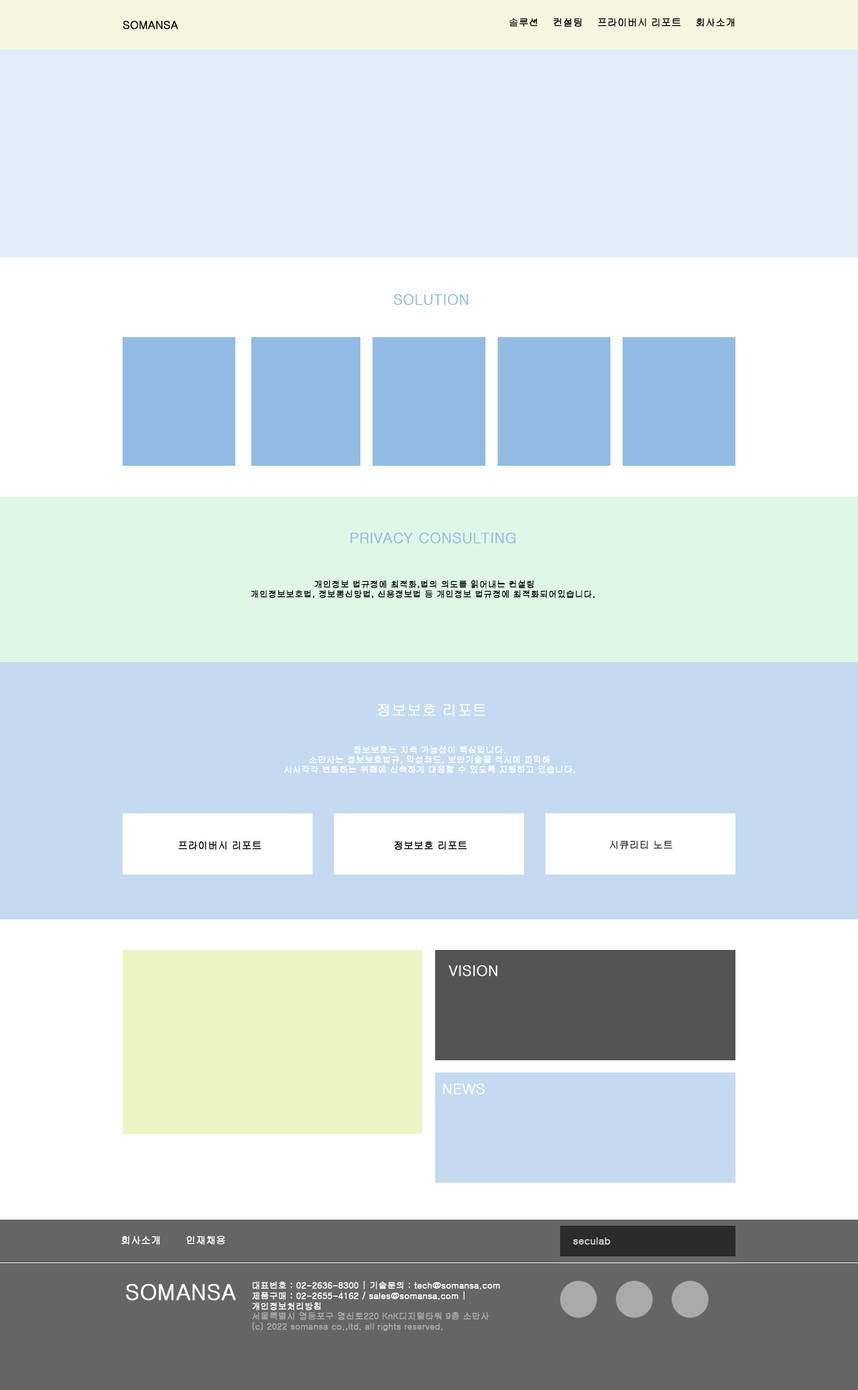
<style>
.page{position:relative;width:858px;height:1390px;background:#ffffff}
.page>*{position:absolute;margin:0}
.t1{font:9.8px "Gulim";color:#000000;font-weight:bold}
.t2{font:11px "Gulim";color:#000000;font-weight:bold}
.t3{font:14.7px "Gulim";color:#92bbe3;font-weight:bold}
.t4{font:8.6px/9.8px "Gulim";color:#000000;font-weight:bold}
.t5{font:14.7px "Gulim";color:#ffffff;font-weight:bold}
.t6{font:8.6px/9.8px "Gulim";color:#ffffff;font-weight:bold}
.t7{font:9.8px "Gulim";color:#353535;font-weight:bold}
.t8{font:9.8px "Gulim";color:#ffffff;font-weight:bold}
.t9{font:9.8px "Gulim";color:#d1d1d1;font-weight:bold}
.t10{font:22.1px "Gulim";color:#ffffff;font-weight:bold}
.t11{font:8.6px "Gulim";color:#ffffff;font-weight:bold}
.t12{font:8.6px "Gulim";color:#aaaaaa;font-weight:bold}
</style>
<div class="page">
<p class="t1" style="left:509px;top:18px;width:225px;height:9px">솔루션    컨설팅    프라이버시 리포트    회사소개</p>
<p class="t2" style="left:123px;top:21px;width:55px;height:8px">SOMANSA</p>
<p class="t3" style="left:393px;top:294px;width:75px;height:11px">SOLUTION</p>
<p class="t3" style="left:351px;top:533px;width:165px;height:11px">PRIVACY CONSULTING</p>
<p class="t4" style="left:251px;top:580px;width:343px;height:18px;text-align:center">개인정보 법규정에 최적화,법의 의도를 읽어내는 컨설팅<br>개인정보보호법, 정보통신망법, 신용정보법 등 개인정보 법규정에 최적화되어있습니다.</p>
<p class="t5" style="left:377px;top:704px;width:109px;height:12px">정보보호 리포트</p>
<p class="t6" style="left:284px;top:746px;width:291px;height:27px;text-align:center">정보보호는 지속 가능성이 핵심입니다.<br>소만사는 정보보호법규, 악성코드, 보안기술을 적시에 파악해<br>시시각각 변화하는 위협에 신속하게 대응할 수 있도록 지원하고 있습니다.</p>
<p class="t1" style="left:178px;top:841px;width:83px;height:9px">프라이버시 리포트</p>
<p class="t1" style="left:394px;top:841px;width:73px;height:9px">정보보호 리포트</p>
<p class="t7" style="left:610px;top:841px;width:62px;height:8px">시큐리티 노트</p>
<p class="t5" style="left:449px;top:965px;width:49px;height:11px">VISION</p>
<p class="t5" style="left:443px;top:1083px;width:42px;height:11px">NEWS</p>
<p class="t8" style="left:121px;top:1235px;width:105px;height:10px">회사소개       인재채용</p>
<p class="t9" style="left:573px;top:1237px;width:37px;height:8px">seculab</p>
<p class="t10" style="left:126px;top:1284px;width:110px;height:16px">SOMANSA</p>
<p class="t11" style="left:252px;top:1281px;width:248px;height:50px">대표번호 : 02-2636-8300 | 기술문의 : tech@somansa.com<br>제품구매 : 02-2655-4162 / sales@somansa.com |<br>개인정보처리방침<br><span class="t12">서울특별시 영등포구 영신로220 KnK디지털타워 9층 소만사<br>(c) 2022 somansa co.,ltd. all rights reserved.</span></p>
</div>
